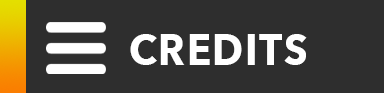
<style>
.page{position:relative;width:384px;height:93px;background:#2e2e2e}
.page>*{position:absolute;margin:0}
.t1{font:44.2px "AvenirNext-Bold";letter-spacing:0.03em;color:#ffffff;scale:0.92 1}
</style>
<div class="page">
<p class="t1" style="left:130px;top:34px;width:177px;height:31px">CREDITS</p>
</div>
